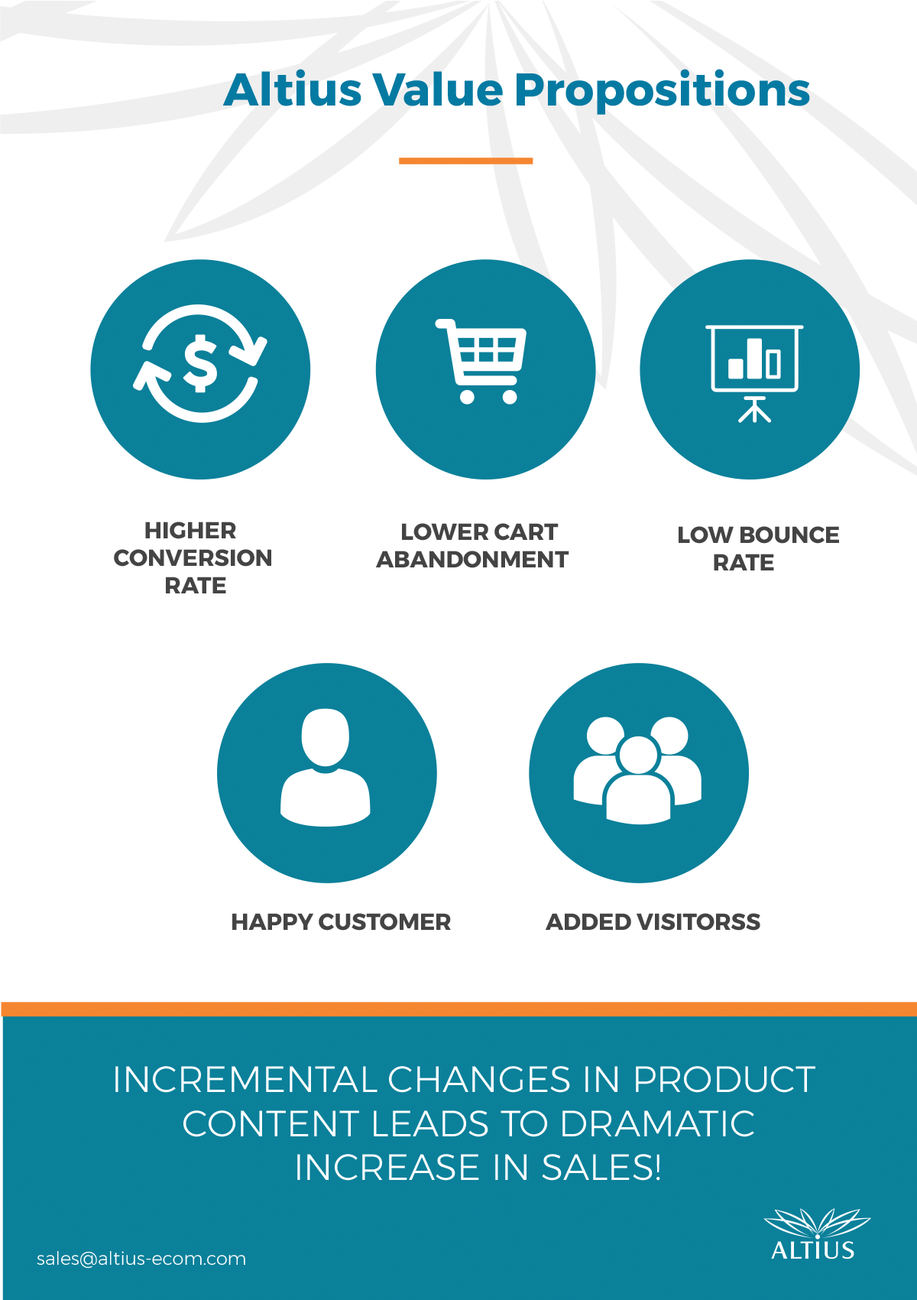
<style>
.page{position:relative;width:917px;height:1300px;background:#ffffff}
.page>*{position:absolute;margin:0}
.t1{font:45.9px "Montserrat-Bold";color:#047aa2}
.t2{font:22.9px "Montserrat-Bold";color:#444445}
.t3{font:45.9px "Montserrat-Bold";color:#444445}
.t4{font:27.5px "Montserrat-Bold";color:#444445}
.t5{font:36.7px "Montserrat-Light";color:#ffffff}
.t6{font:18.3px "Montserrat-Light";color:#ffffff}
</style>
<div class="page">
<p class="t1" style="left:222px;top:69px;width:588px;height:46px">Altius Value Propositions</p>
<p class="t2" style="left:114px;top:521px;width:157px;height:72px"><span class="t3">     </span>HIGHER<br>    CONVERSION<br>              RATE</p>
<p class="t2" style="left:375px;top:523px;width:195px;height:45px"><span class="t4">    </span>LOWER CART<br>ABANDONMENT</p>
<p class="t2" style="left:679px;top:526px;width:160px;height:44px">LOW BOUNCE<br>       RATE</p>
<p class="t2" style="left:232px;top:913px;width:219px;height:17px">HAPPY CUSTOMER</p>
<p class="t2" style="left:545px;top:913px;width:216px;height:17px">ADDED VISITORSS</p>
<p class="t5" style="left:115px;top:1066px;width:701px;height:114px">INCREMENTAL CHANGES IN PRODUCT <br>       CONTENT LEADS TO DRAMATIC<br>                  INCREASE IN SALES!</p>
<p class="t6" style="left:37px;top:1251px;width:208px;height:17px">sales@altius-ecom.com</p>
</div>
